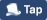
<style>
.page{position:relative;width:47px;height:20px;background:#2b4771}
.page>*{position:absolute;margin:0}
.t1{font:10.9px "Helvetica-Bold";color:#fbfdfe}
</style>
<div class="page">
<p class="t1" style="left:24px;top:5px;width:18px;height:11px">Tap</p>
</div>
